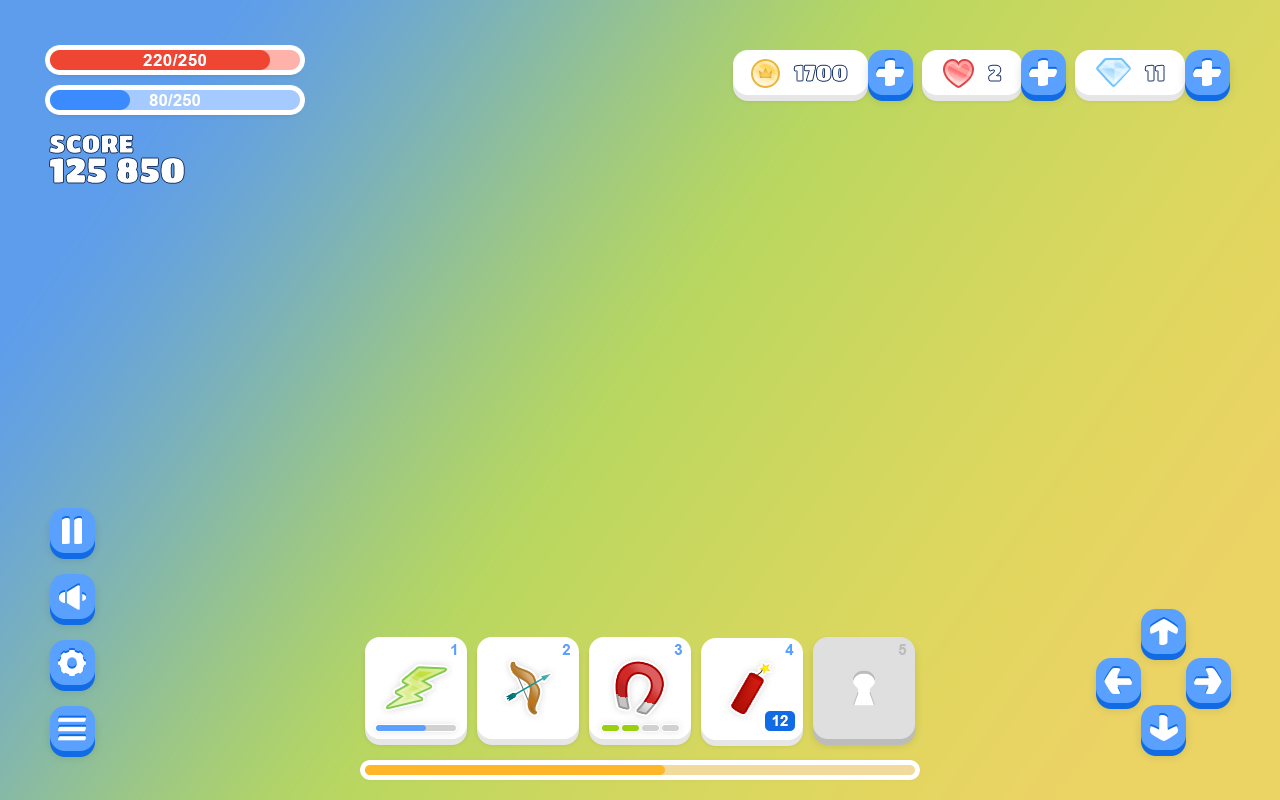
<style>
.page{position:relative;width:1280px;height:800px}
.page>*{position:absolute;margin:0}
.t1{font:17px "Arial-BoldMT";letter-spacing:0.025em;color:#ffffff;text-transform:uppercase}
.t2{font:17px "Arial-BoldMT";color:#ffffff;text-transform:uppercase}
.t3{font:35px/30px "TitanOne";color:#ffffff;text-transform:uppercase}
.t4{font:25px/30px "TitanOne";color:#ffffff;text-transform:uppercase}
.t5{font:15px "Arial-BoldMT";letter-spacing:0.01em;color:#59a0ff;text-transform:uppercase}
.t6{font:15px "Arial-BoldMT";letter-spacing:0.01em;color:#bcbcbc;text-transform:uppercase}
.t7{font:15px "Arial-BoldMT";color:#ffffff}
</style>
<div class="page">
<p class="t1" style="left:143px;top:54px;width:63px;height:12px">220/250</p>
<p class="t2" style="left:149px;top:94px;width:51px;height:12px">80/250</p>
<p class="t3" style="left:49px;top:135px;width:136px;height:49px"><span class="t4">score <br></span>125 850</p>
<p class="t5" style="left:451px;top:644px;width:6px;height:11px">1</p>
<p class="t5" style="left:562px;top:644px;width:8px;height:11px">2</p>
<p class="t5" style="left:674px;top:644px;width:9px;height:11px">3</p>
<p class="t5" style="left:785px;top:644px;width:9px;height:11px">4</p>
<p class="t6" style="left:898px;top:644px;width:9px;height:11px">5</p>
<p class="t7" style="left:772px;top:715px;width:16px;height:11px">12</p>
</div>
